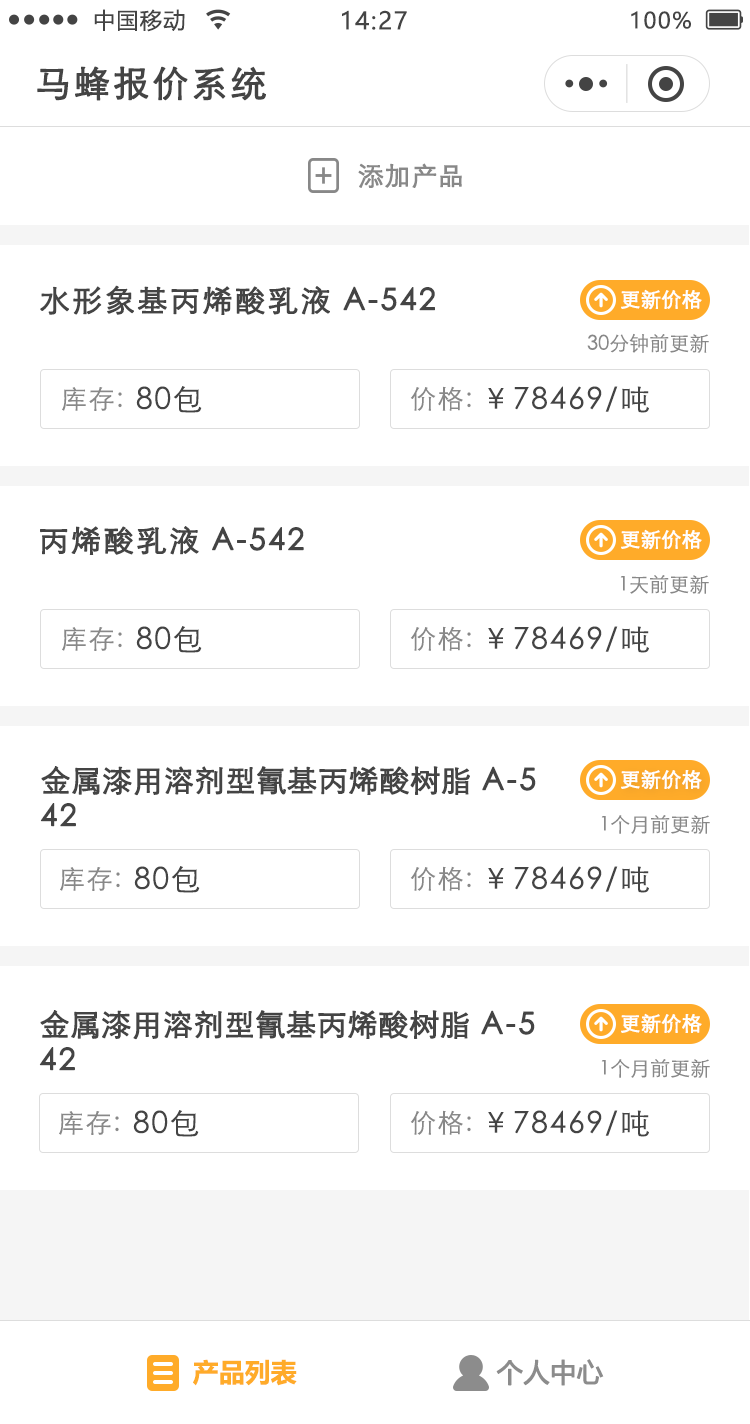
<style>
.page{position:relative;width:750px;height:1424px;background:#ffffff}
.page>*{position:absolute;margin:0}
.t1{font:22px "MicrosoftYaHei";letter-spacing:0.06em;color:#444444}
.t2{font:24px "MicrosoftYaHei";letter-spacing:0.06em;color:#444444}
.t3{font:36px "STXihei";letter-spacing:0.06em;color:#444444;font-weight:bold}
.t4{font:26px "STXihei";color:#888888;font-weight:bold}
.t5{font:30px "STXihei";letter-spacing:0.06em;color:#444444;font-weight:bold}
.t6{font:20px "STXihei";color:#ffffff;font-weight:bold}
.t7{font:20px "STXihei";color:#888888}
.t8{font:26px "STXihei";letter-spacing:0.06em;color:#888888}
.t9{font:30px "STXihei";letter-spacing:0.06em;color:#444444}
.t10{font:30px/36px "STXihei";color:#444444;font-weight:bold}
.t11{font:30px/36px "STXihei";letter-spacing:0.06em;color:#444444;font-weight:bold}
.t12{font:26px "MicrosoftYaHeiUI-Bold";color:#ffab29}
.t13{font:26px "MicrosoftYaHeiUI";color:#8c8c8c;font-weight:bold}
</style>
<div class="page">
<p class="t1" style="left:94px;top:9px;width:91px;height:23px">中国移动</p>
<p class="t2" style="left:342px;top:10px;width:65px;height:20px">14:27</p>
<p class="t1" style="left:631px;top:11px;width:60px;height:18px">100%</p>
<p class="t3" style="left:37px;top:66px;width:229px;height:35px">马蜂报价系统</p>
<p class="t4" style="left:358px;top:163px;width:104px;height:25px">添加产品</p>
<p class="t5" style="left:40px;top:285px;width:395px;height:30px">水形象基丙烯酸乳液 A-542</p>
<p class="t6" style="left:621px;top:289px;width:81px;height:21px">更新价格</p>
<p class="t7" style="left:587px;top:333px;width:122px;height:20px">30分钟前更新</p>
<p class="t8" style="left:62px;top:387px;width:60px;height:24px">库存:</p>
<p class="t9" style="left:136px;top:386px;width:66px;height:27px">80包</p>
<p class="t8" style="left:410px;top:386px;width:61px;height:25px">价格:</p>
<p class="t9" style="left:488px;top:386px;width:161px;height:27px">￥78469/吨</p>
<p class="t5" style="left:40px;top:526px;width:264px;height:29px">丙烯酸乳液 A-542</p>
<p class="t6" style="left:621px;top:529px;width:81px;height:21px">更新价格</p>
<p class="t7" style="left:620px;top:575px;width:89px;height:19px">1天前更新</p>
<p class="t8" style="left:62px;top:627px;width:60px;height:24px">库存:</p>
<p class="t9" style="left:136px;top:626px;width:66px;height:27px">80包</p>
<p class="t8" style="left:410px;top:626px;width:61px;height:25px">价格:</p>
<p class="t9" style="left:488px;top:626px;width:161px;height:27px">￥78469/吨</p>
<p class="t10" style="left:40px;top:766px;width:496px;height:61px">金属漆用溶剂型氰基丙烯酸树脂<span class="t11"> A-5<br>42</span></p>
<p class="t6" style="left:621px;top:769px;width:81px;height:21px">更新价格</p>
<p class="t7" style="left:601px;top:815px;width:109px;height:19px">1个月前更新</p>
<p class="t8" style="left:60px;top:867px;width:60px;height:24px">库存:</p>
<p class="t9" style="left:134px;top:866px;width:66px;height:27px">80包</p>
<p class="t8" style="left:410px;top:866px;width:61px;height:25px">价格:</p>
<p class="t9" style="left:488px;top:866px;width:161px;height:27px">￥78469/吨</p>
<p class="t10" style="left:39px;top:1010px;width:496px;height:61px">金属漆用溶剂型氰基丙烯酸树脂<span class="t11"> A-5<br>42</span></p>
<p class="t6" style="left:621px;top:1013px;width:81px;height:21px">更新价格</p>
<p class="t7" style="left:601px;top:1059px;width:109px;height:19px">1个月前更新</p>
<p class="t9" style="left:133px;top:1110px;width:66px;height:27px">80包</p>
<p class="t8" style="left:410px;top:1110px;width:61px;height:25px">价格:</p>
<p class="t9" style="left:488px;top:1110px;width:161px;height:27px">￥78469/吨</p>
<p class="t8" style="left:59px;top:1111px;width:60px;height:24px">库存:</p>
<p class="t12" style="left:193px;top:1359px;width:104px;height:27px">产品列表</p>
<p class="t13" style="left:496px;top:1359px;width:108px;height:27px">个人中心</p>
</div>
